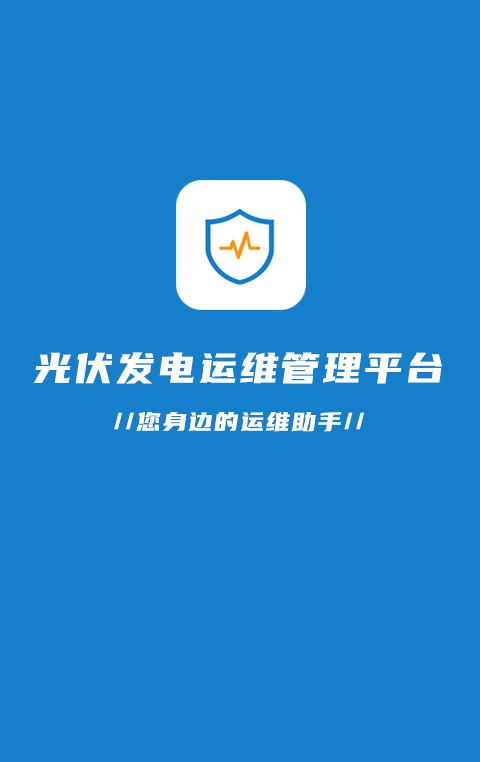
<style>
.page{position:relative;width:480px;height:762px;background:#157fcc}
.page>*{position:absolute;margin:0}
.t1{font:42.7px "YouSheBiaoTiHei";letter-spacing:0.05em;color:#ffffff}
.t2{font:26.7px "YouSheBiaoTiHei";letter-spacing:0.05em;color:#ffffff}
</style>
<div class="page">
<p class="t1" style="left:33px;top:352px;width:409px;height:32px">光伏发电运维管理平台</p>
<p class="t2" style="left:114px;top:412px;width:250px;height:20px">//您身边的运维助手//</p>
</div>
